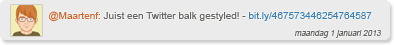
<style>
.page{position:relative;width:394px;height:45px;background:#ebebeb}
.page>*{position:absolute;margin:0}
.t1{font:10px "ArialMT";color:#666666}
.t2{font:10px "ArialMT";color:#cc6633}
.t3{font:10px "ArialMT";color:#3a7eb7}
.t4{font:8px "ArialMT";color:#666666;font-style:italic}
</style>
<div class="page">
<p class="t1" style="left:48px;top:11px;width:324px;height:11px"><span class="t2">@Maartenf:</span> Juist een Twitter balk gestyled! - <span class="t3">bit.ly/467573446254764587</span></p>
<p class="t4" style="left:294px;top:30px;width:87px;height:8px">maandag 1 januari 2013</p>
</div>
